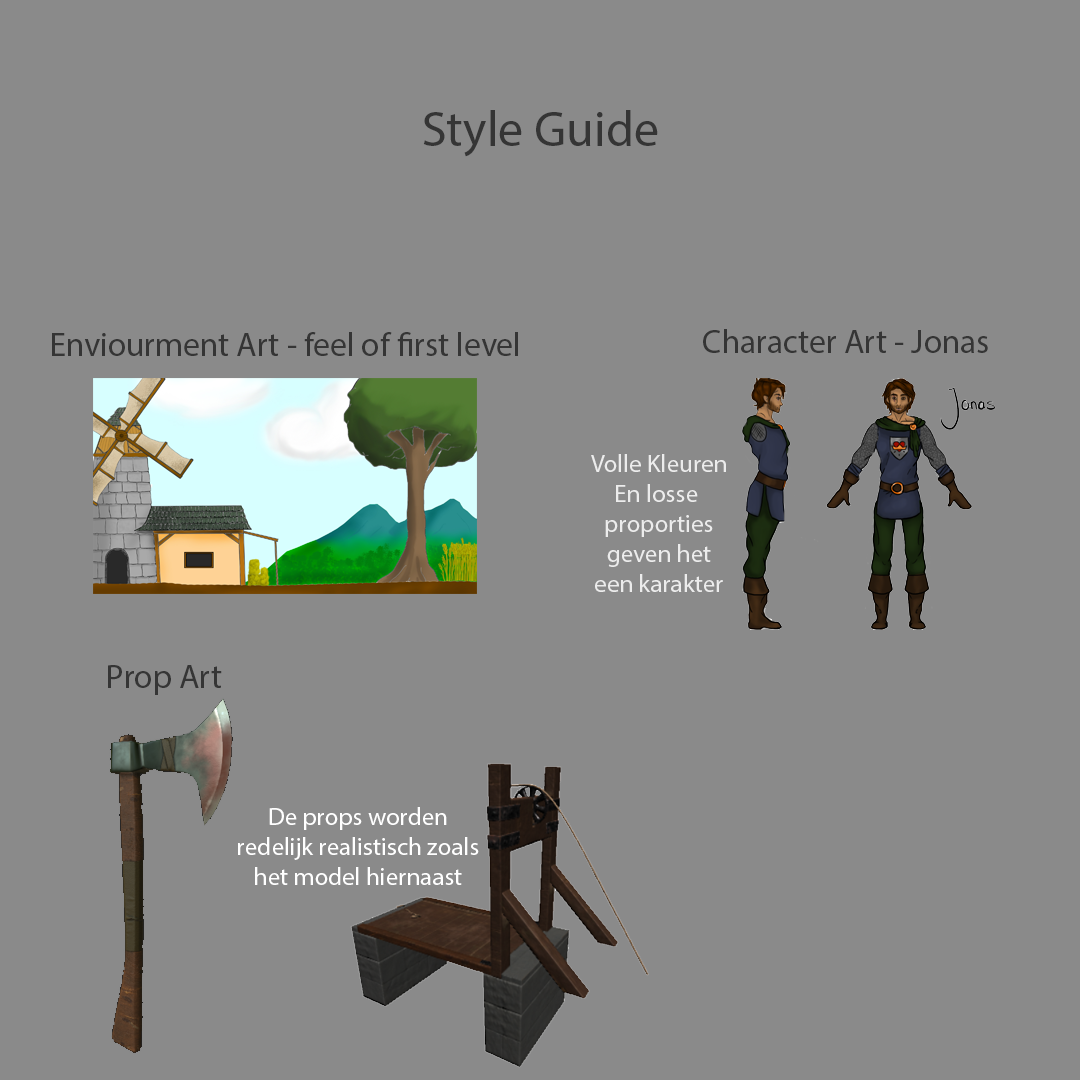
<style>
.page{position:relative;width:1080px;height:1080px;background:#8a8a8a}
.page>*{position:absolute;margin:0}
.t1{font:12px "MyriadPro-Regular";color:#353535}
.t2{font:33.3px "MyriadPro-Regular";color:#353535}
.t3{font:25px "MyriadPro-Regular";color:#ececec}
.t4{font:25px "MyriadPro-Regular";color:#ffffff}
</style>
<div class="page">
<p class="t1" style="left:423px;top:110px;width:235px;height:47px">Style Guide</p>
<p class="t2" style="left:703px;top:329px;width:285px;height:24px">Character Art - Jonas</p>
<p class="t2" style="left:52px;top:332px;width:466px;height:24px">Enviourment Art - feel of first level</p>
<p class="t3" style="left:591px;top:454px;width:135px;height:138px;text-align:center">Volle Kleuren<br>En losse <br>proporties<br>geven het<br>een karakter</p>
<p class="t2" style="left:108px;top:665px;width:114px;height:30px">Prop Art</p>
<p class="t4" style="left:238px;top:807px;width:241px;height:78px;text-align:center">De props worden<br>redelijk realistisch zoals<br>het model hiernaast</p>
</div>
